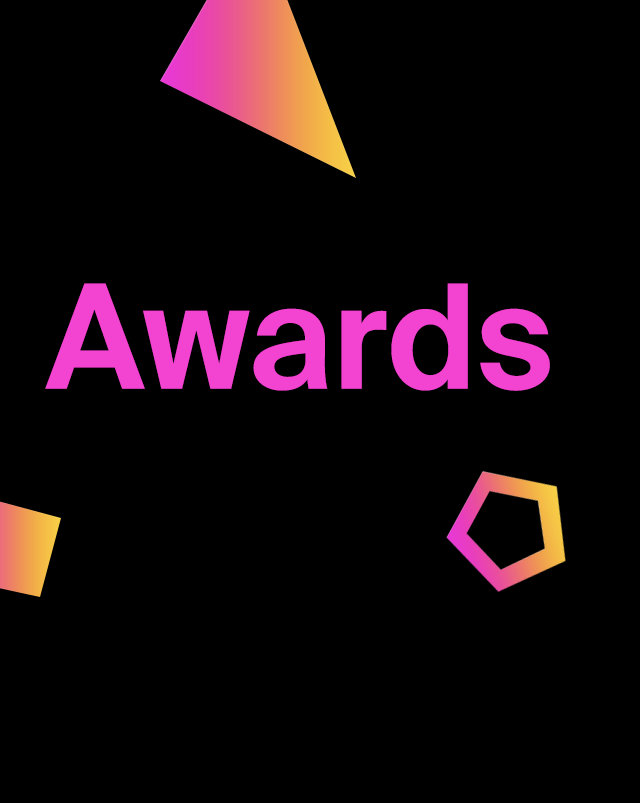
<style>
.page{position:relative;width:640px;height:803px;background:#000000}
.page>*{position:absolute;margin:0}
.t1{font:144.7px "SuisseIntl-SemiBold";color:#f243d1}
</style>
<div class="page">
<p class="t1" style="left:45px;top:283px;width:505px;height:108px">Awards</p>
</div>
